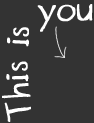
<style>
.page{position:relative;width:94px;height:123px;background:#333333}
.page>*{position:absolute;margin:0}
.t1{font:37px "DesignerNotes";color:#ffffff;font-weight:bold}
</style>
<div class="page">
<p class="t1" style="left:2px;top:4px;width:91px;height:118px;rotate:-90deg">This is you</p>
</div>
